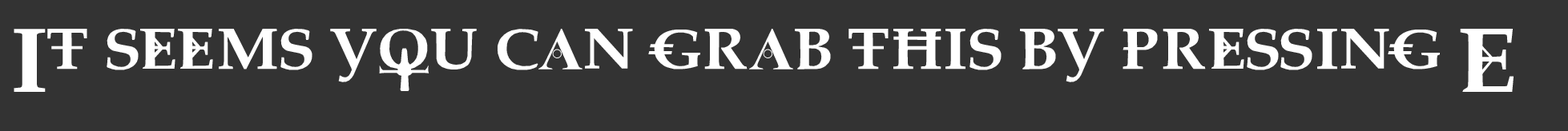
<style>
.page{position:relative;width:1568px;height:131px;background:#333333}
.page>*{position:absolute;margin:0}
.t1{font:60.1px "Dreaming-of-Lilian";color:#ffffff}
</style>
<div class="page">
<p class="t1" style="left:14px;top:29px;width:1500px;height:63px">It seems you can grab this by pressing E</p>
</div>
